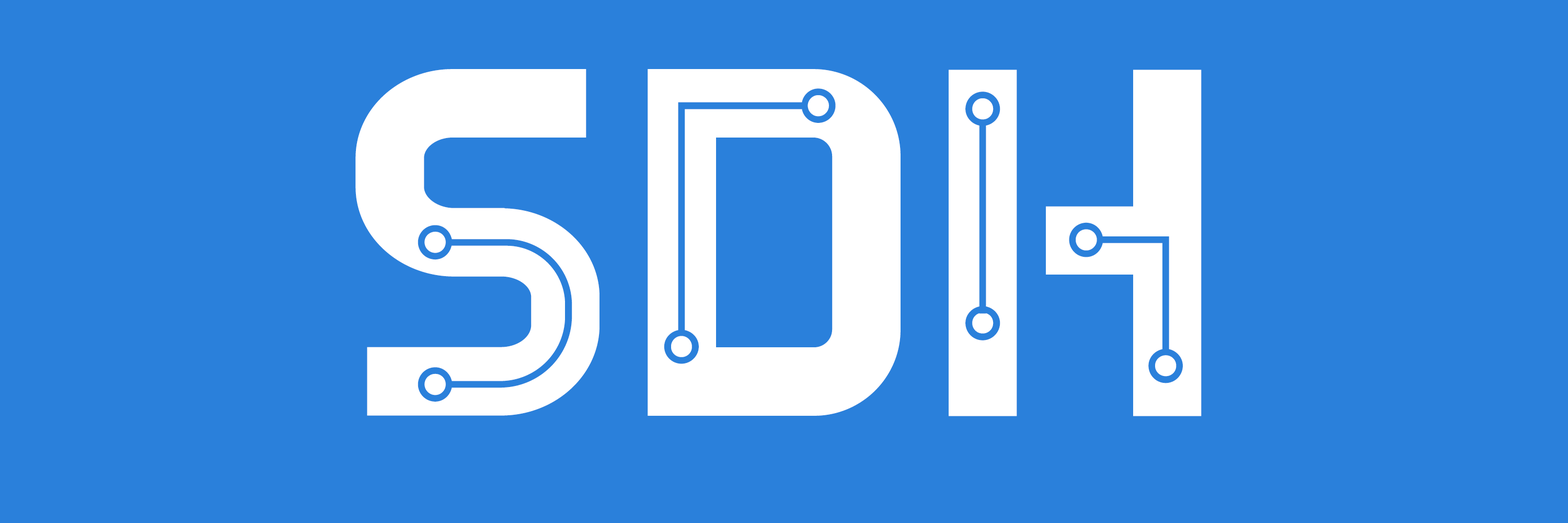
<style>
.page{position:relative;width:1568px;height:523px;background:#2a80db}
.page>*{position:absolute;margin:0}
.t1{font:493.9px "Obveron";color:#ffffff}
</style>
<div class="page">
<p class="t1" style="left:355px;top:69px;width:847px;height:347px">SDH</p>
</div>
